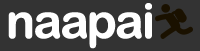
<style>
.page{position:relative;width:200px;height:51px;background:#333333}
.page>*{position:absolute;margin:0}
.t1{font:48px "ArialRoundedMTBold";letter-spacing:-0.06em;color:#f7f7f7;font-weight:bold}
</style>
<div class="page">
<p class="t1" style="left:8px;top:3px;width:144px;height:46px">naapai</p>
</div>
